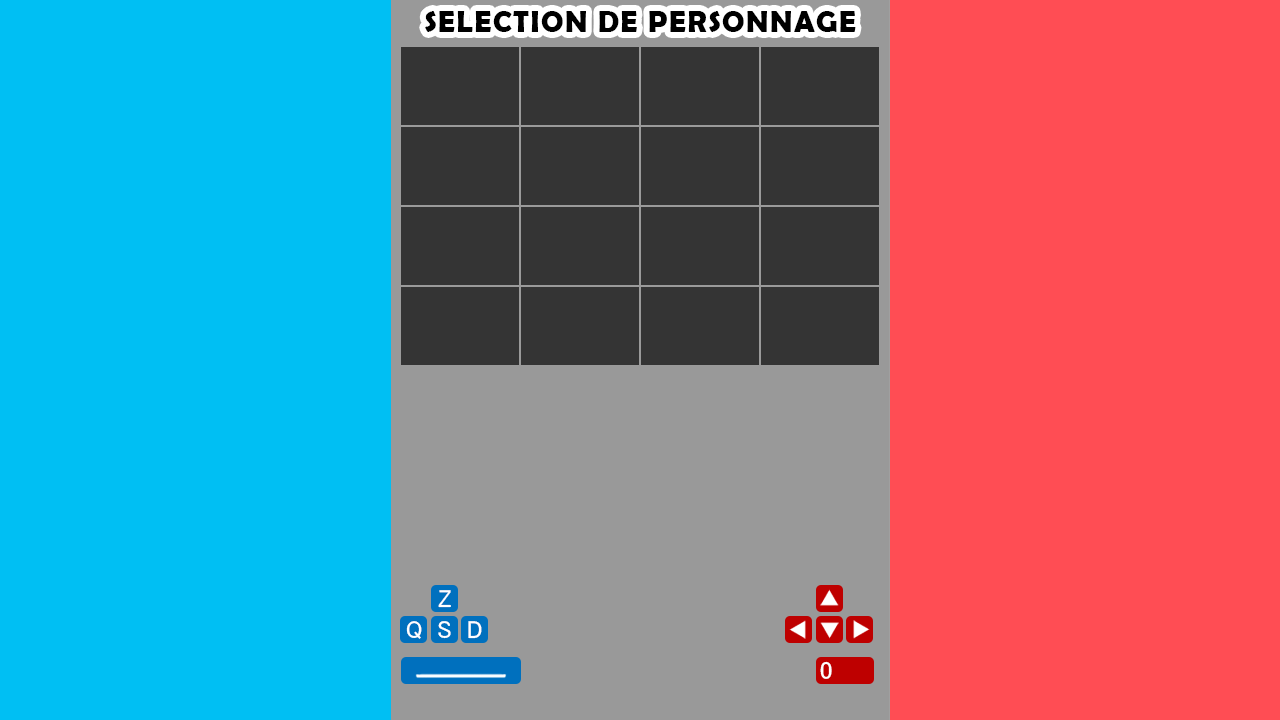
<style>
.page{position:relative;width:1280px;height:720px;background:#ff4d54}
.page>*{position:absolute;margin:0}
.t1{font:30px "BerlinSansFBDemi-Bold";letter-spacing:0.05em;color:#000000}
.t2{font:24.4px "MS-UIGothic";color:#ffffff}
</style>
<div class="page">
<p class="t1" style="left:425px;top:11px;width:431px;height:21px">SELECTION DE PERSONNAGE</p>
<p class="t2" style="left:438px;top:590px;width:13px;height:18px">Z</p>
<p class="t2" style="left:406px;top:621px;width:16px;height:18px">Q</p>
<p class="t2" style="left:438px;top:621px;width:13px;height:18px">S</p>
<p class="t2" style="left:468px;top:621px;width:14px;height:18px">D</p>
<p class="t2" style="left:820px;top:661px;width:12px;height:18px">0</p>
</div>
